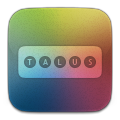
<style>
.page{position:relative;width:120px;height:120px;background:#ffffff}
.page>*{position:absolute;margin:0}
.t1{font:8px "MyriadPro-Regular";letter-spacing:0.02em;color:#8ecdcd}
.t2{font:8px "MyriadPro-Regular";letter-spacing:0.02em;color:#85b2b4}
.t3{font:8px "MyriadPro-Regular";letter-spacing:0.02em;color:#a09e9e}
.t4{font:8px "MyriadPro-Regular";letter-spacing:0.02em;color:#ca827a}
.t5{font:8px "MyriadPro-Regular";letter-spacing:0.02em;color:#d07263}
</style>
<div class="page">
<p class="t1" style="left:27px;top:59px;width:5px;height:6px">T</p>
<p class="t2" style="left:43px;top:59px;width:5px;height:6px">A</p>
<p class="t3" style="left:58px;top:59px;width:4px;height:6px">L</p>
<p class="t4" style="left:72px;top:59px;width:5px;height:6px">U</p>
<p class="t5" style="left:88px;top:59px;width:4px;height:6px">S</p>
</div>
